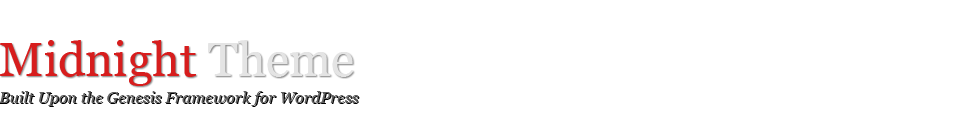
<style>
.page{position:relative;width:960px;height:140px;background:#ffffff}
.page>*{position:absolute;margin:0}
.t1{font:48px "Georgia";color:#d71d1d}
.t2{font:48px "Georgia";color:#e4e4e4}
.t3{font:16px "Georgia-Italic";color:#606060}
</style>
<div class="page">
<p class="t1" style="left:0px;top:40px;width:354px;height:46px">Midnight <span class="t2">Theme</span></p>
<p class="t3" style="left:0px;top:91px;width:359px;height:15px">Built Upon the Genesis Framework for WordPress</p>
</div>
